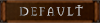
<style>
.page{position:relative;width:100px;height:23px}
.page>*{position:absolute;margin:0}
.t1{font:12.8px "Mason-Regular";letter-spacing:0.08em}
</style>
<div class="page">
<p class="t1" style="left:19px;top:5px;width:64px;height:11px">DEFAULT</p>
</div>
